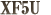
<style>
.page{position:relative;width:51px;height:15px;background:#ffffff}
.page>*{position:absolute;margin:0}
.t1{font:17px "RyuminPro-ExBold";letter-spacing:-0.06em;color:#4a3f32;font-weight:bold;scale:0.9 1}
</style>
<div class="page">
<p class="t1" style="left:0px;top:1px;width:40px;height:14px">XF5U</p>
</div>
